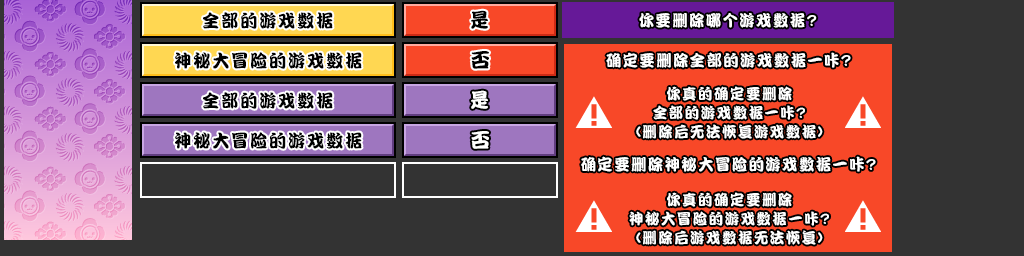
<style>
.page{position:relative;width:1024px;height:256px;background:#333333}
.page>*{position:absolute;margin:0}
.t1{font:18px "DFPKanTingLiuW9";letter-spacing:0.1em;color:#000000;scale:0.96 1}
.t2{font:20px "DFPKanTingLiuW9";letter-spacing:0.09em;color:#000000;scale:0.96 1}
.t3{font:16px "DFPKanTingLiuW9";letter-spacing:0.1em;color:#ffffff;scale:0.96 1}
.t4{font:15px/19px "DFPKanTingLiuW9";letter-spacing:0.1em;color:#ffffff;scale:0.96 1}
.t5{font:20px "DFPKanTingLiuW9";letter-spacing:0.09em;color:#ffffff;scale:0.96 1}
</style>
<div class="page">
<p class="t1" style="left:203px;top:12px;width:130px;height:17px">全部的游戏数据</p>
<p class="t2" style="left:471px;top:10px;width:17px;height:19px">是</p>
<p class="t3" style="left:639px;top:13px;width:178px;height:15px">你要删除哪个游戏数据?</p>
<p class="t1" style="left:175px;top:52px;width:187px;height:17px">神秘大冒险的游戏数据</p>
<p class="t2" style="left:471px;top:51px;width:18px;height:18px">否</p>
<p class="t3" style="left:606px;top:52px;width:245px;height:16px">确定要删除全部的游戏数据一咔?</p>
<p class="t4" style="left:636px;top:86px;width:187px;height:53px;text-align:center">你真的确定要删除<br>全部的游戏数据一咔?<br>(删除后无法恢复游戏数据)</p>
<p class="t1" style="left:203px;top:92px;width:130px;height:17px">全部的游戏数据</p>
<p class="t5" style="left:471px;top:90px;width:17px;height:19px">是</p>
<p class="t1" style="left:175px;top:132px;width:187px;height:17px">神秘大冒险的游戏数据</p>
<p class="t5" style="left:471px;top:131px;width:18px;height:18px">否</p>
<p class="t3" style="left:581px;top:156px;width:295px;height:16px">确定要删除神秘大冒险的游戏数据一咔?</p>
<p class="t4" style="left:629px;top:192px;width:200px;height:53px;text-align:center">你真的确定要删除<br>神秘大冒险的游戏数据一咔?<br>(删除后游戏数据无法恢复)</p>
</div>
